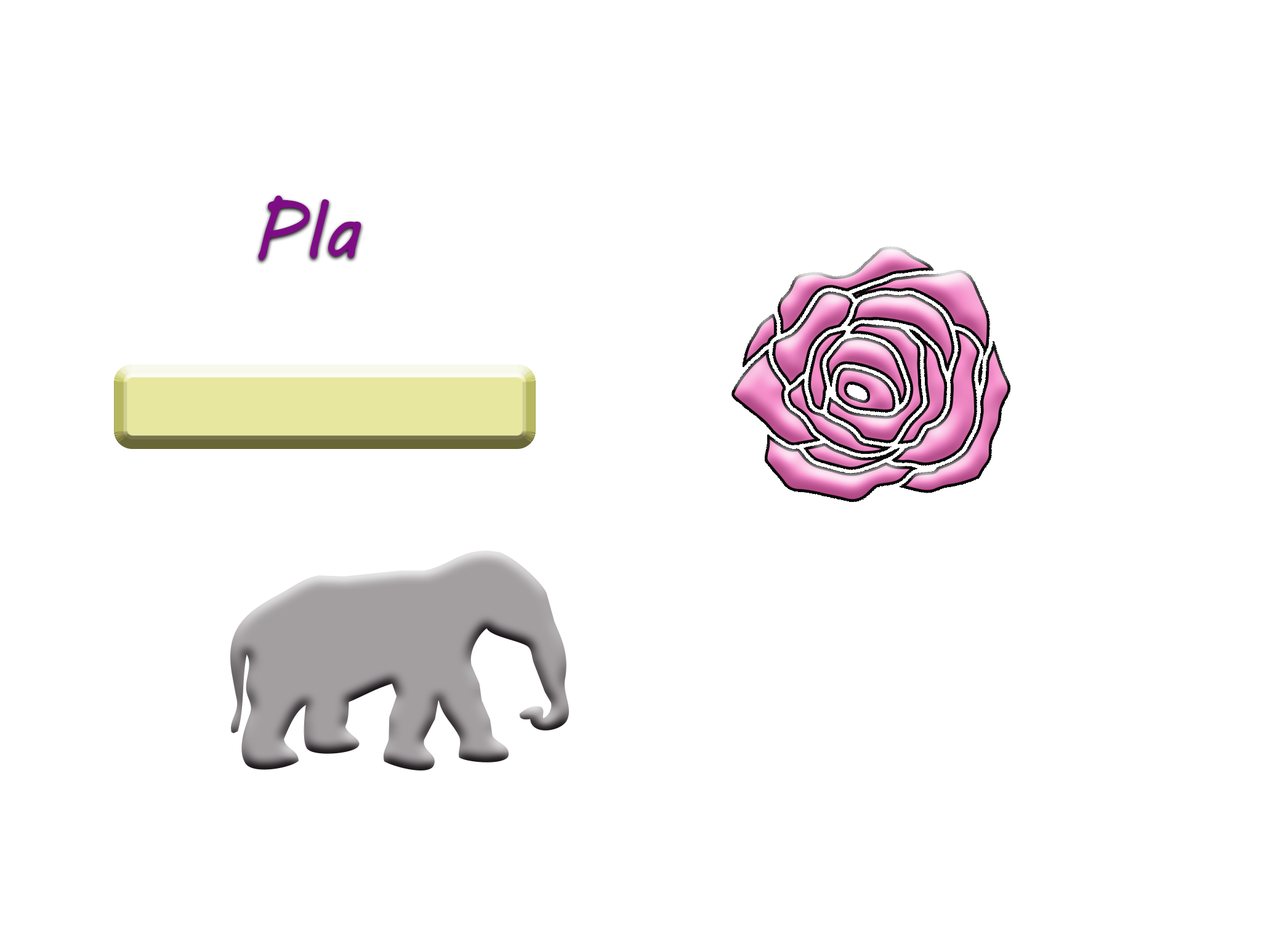
<style>
.page{position:relative;width:1261px;height:946px;background:#ffffff}
.page>*{position:absolute;margin:0}
.t1{font:77.6px "MVBoli";color:#7e0d85}
</style>
<div class="page">
<p class="t1" style="left:258px;top:195px;width:103px;height:65px">Pla</p>
</div>
